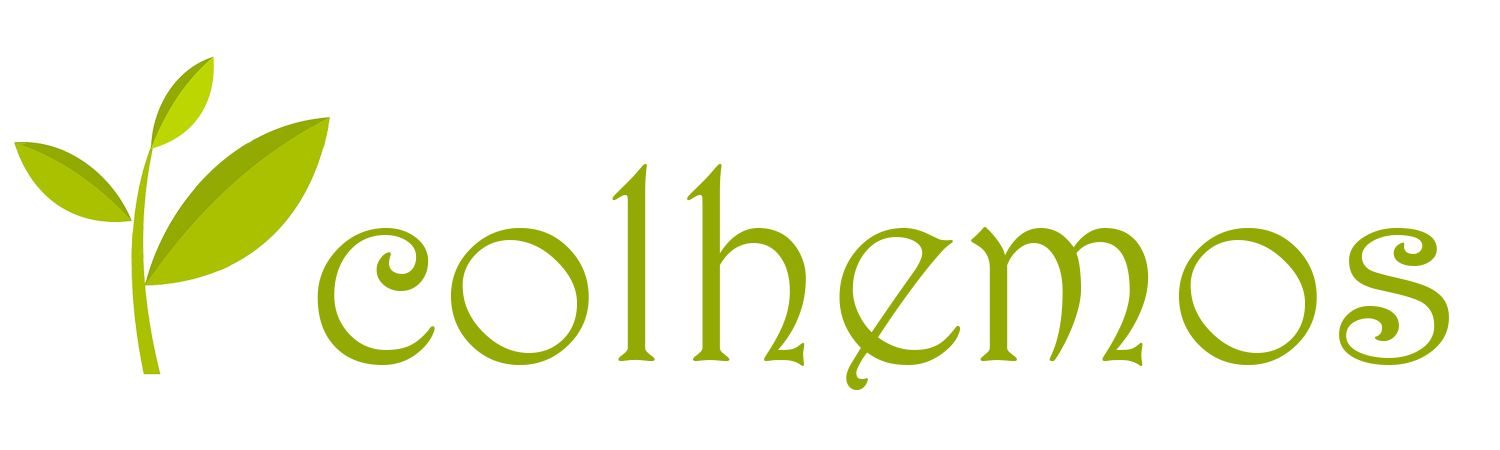
<style>
.page{position:relative;width:1500px;height:450px;background:#ffffff}
.page>*{position:absolute;margin:0}
.t1{font:277px "Harrington";color:#93aa04}
</style>
<div class="page">
<p class="t1" style="left:317px;top:163px;width:1132px;height:227px">colhemos</p>
</div>
